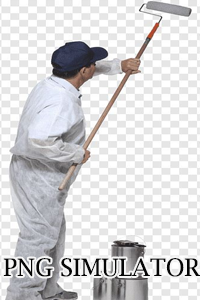
<style>
.page{position:relative;width:200px;height:300px}
.page>*{position:absolute;margin:0}
.t1{font:24px "LucidaBright";color:#060606}
</style>
<div class="page">
<p class="t1" style="left:3px;top:258px;width:198px;height:19px">PNG SIMULATOR</p>
</div>
